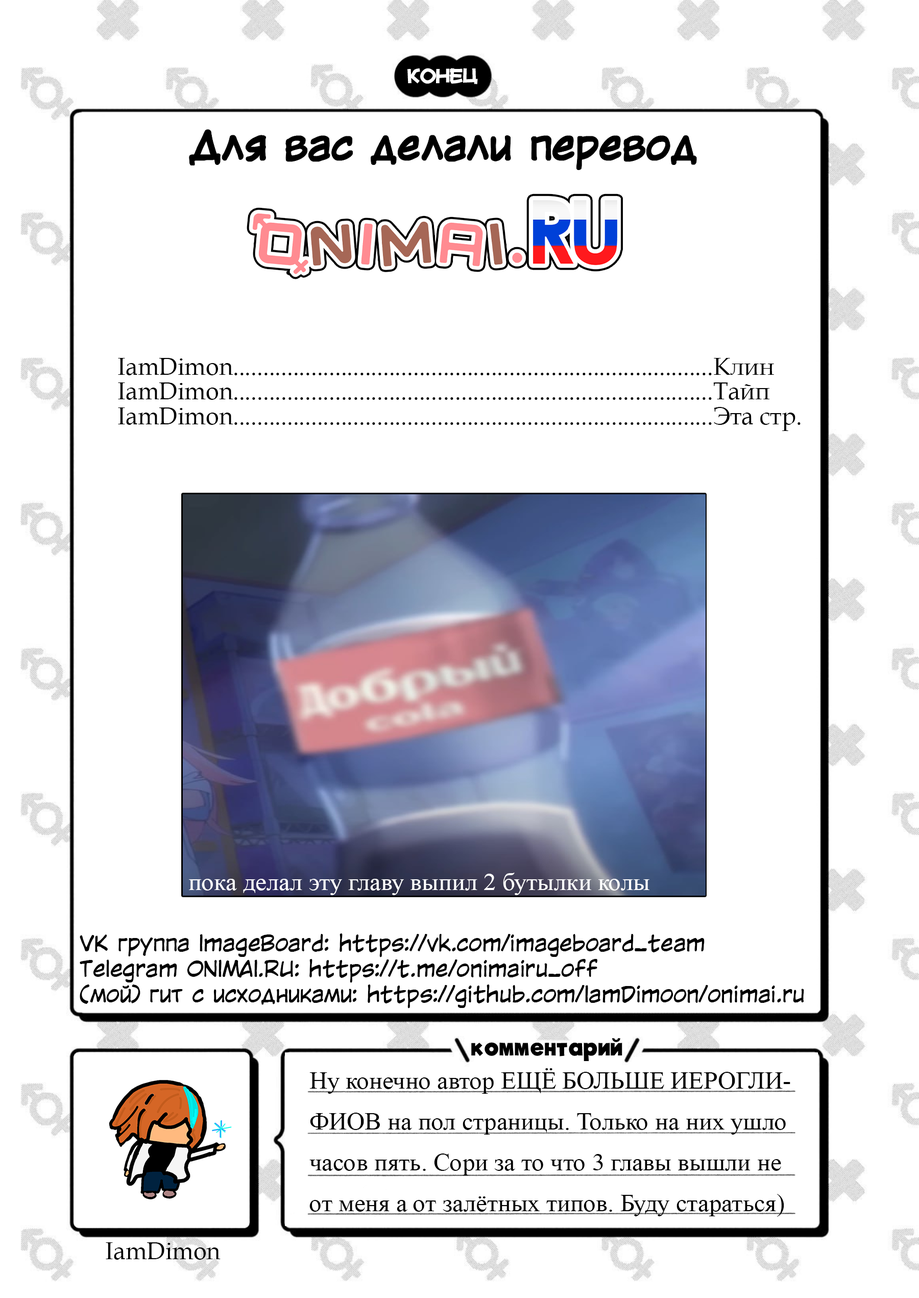
<style>
.page{position:relative;width:919px;height:1298px;background:#ffffff}
.page>*{position:absolute;margin:0}
.t1{font:17px "Mauryssel-Bold";color:#ffffff}
.t2{font:38.3px "KuraiVoice2";color:#000000;font-weight:bold}
.t3{font:24px/24.8px "BookAntiqua";color:#000000}
.t4{font:24.8px "TimesNewRomanPSMT";color:#ffffff}
.t5{font:21.3px/25.5px "KuraiVoice2";color:#000000}
.t6{font:21.3px/34px "MyriadPro-Regular";color:#000000}
.t7{font:63.8px/51px "ADomIno";color:#000000}
.t8{font:21.3px/23.4px "MyriadPro-Regular";color:#000000}
.t9{font:23.4px "MyFontBold";color:#000000}
.t10{font:24.8px/40.8px "TimesNewRomanPSMT";color:#000000}
.t11{font:24px "BookAntiqua";color:#000000}
</style>
<div class="page">
<p class="t1" style="left:407px;top:68px;width:71px;height:16px">конец</p>
<p class="t2" style="left:189px;top:130px;width:507px;height:40px">Для вас делали перевод</p>
<p class="t3" style="left:118px;top:358px;width:682px;height:73px">IamDimon................................................................................Клин<br>IamDimon................................................................................Тайп<br>IamDimon................................................................................Эта стр.</p>
<p class="t4" style="left:189px;top:872px;width:460px;height:23px">пока делал эту главу выпил 2 бутылки колы</p>
<p class="t5" style="left:80px;top:933px;width:724px;height:75px"><span class="t6"><br><br><br><br><br><br><br><br><br></span><span class="t7"><br><br>                      <br></span><span class="t6"><br><br></span><span class="t8"><br><br><br><br><br><br><br><br><br><br></span><br>VK группа ImageBoard: https://vk.com/imageboard_team<br>Telegram ONIMAI.RU: https://t.me/onimairu_off<br>(мой) гит с исходниками: https://github.com/IamDimoon/onimai.ru<br><span class="t8"></span></p>
<p class="t9" style="left:471px;top:1038px;width:151px;height:23px">комментарий</p>
<p class="t10" style="left:309px;top:1068px;width:481px;height:149px">Ну конечно автор ЕЩЁ БОЛЬШЕ ИЕРОГЛИ-<br>ФИОВ на пол страницы. Только на них ушло<br>часов пять. Сори за то что 3 главы вышли не <br>от меня а от залётных типов. Буду стараться)</p>
<p class="t11" style="left:106px;top:1242px;width:115px;height:17px">IamDimon</p>
</div>
